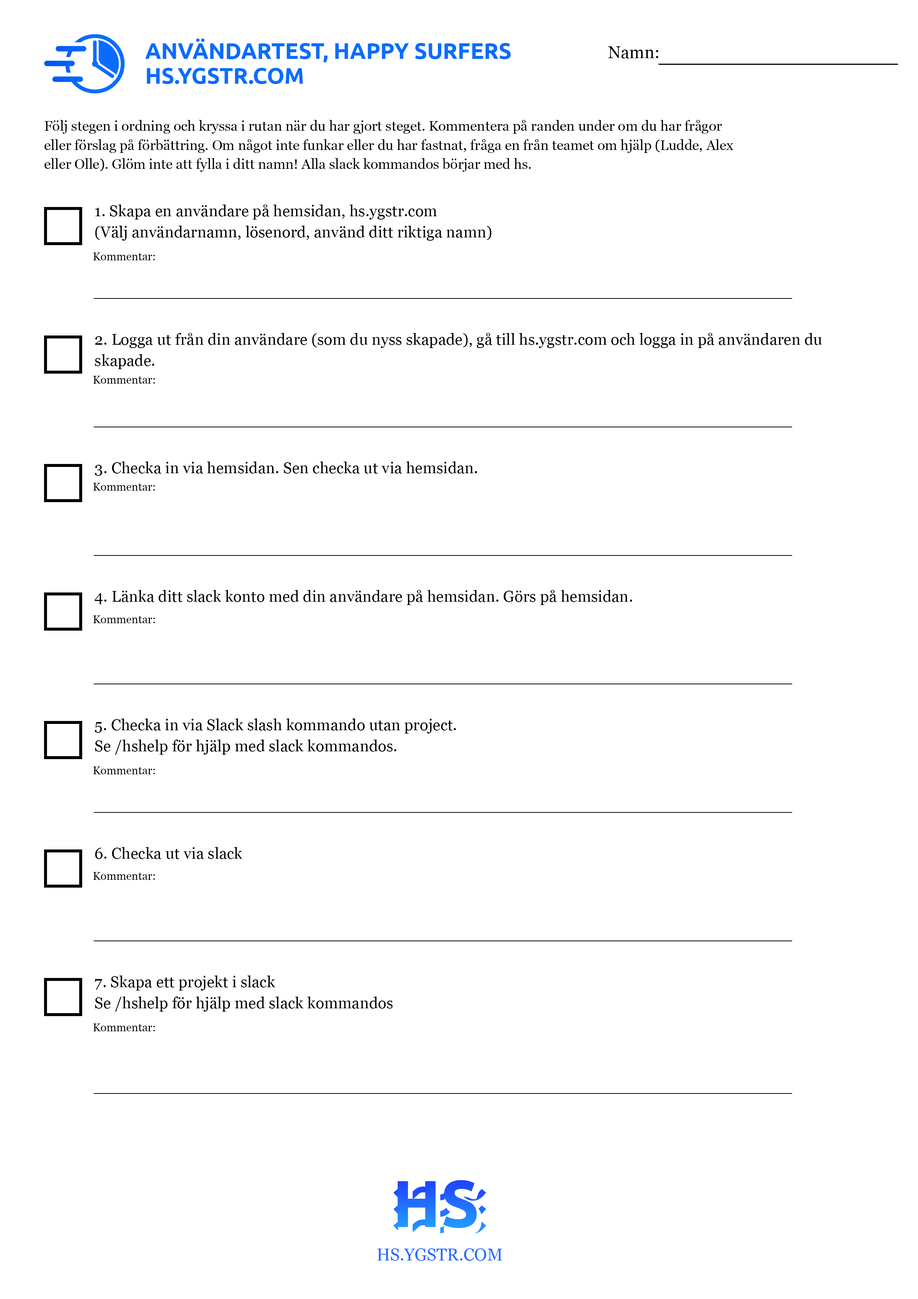
<style>
.page{position:relative;width:918px;height:1299px;background:#ffffff}
.page>*{position:absolute;margin:0}
.t1{font:22.2px/24.9px "Ubuntu-Bold";color:#0a6cff}
.t2{font:17px "Georgia";color:#000000}
.t3{font:13.9px/19.1px "Georgia";color:#000000}
.t4{font:15.7px/21.4px "Georgia";color:#000000}
.t5{font:11.2px "Georgia";color:#000000}
.t6{font:15.7px "Georgia";color:#000000}
.t7{font:17px "Georgia";color:#216aff}
</style>
<div class="page">
<p class="t1" style="left:145px;top:39px;width:366px;height:45px">ANVÄNDARTEST, HAPPY SURFERS<br>HS.YGSTR.COM</p>
<p class="t2" style="left:608px;top:46px;width:51px;height:12px">Namn:</p>
<p class="t3" style="left:44px;top:120px;width:689px;height:52px">Följ stegen i ordning och kryssa i rutan när du har gjort steget. Kommentera på randen under om du har frågor eller förslag på förbättring. Om något inte funkar eller du har fastnat, fråga en från teamet om hjälp (Ludde, Alex eller Olle). Glöm inte att fylla i ditt namn! Alla slack kommandos börjar med hs.</p>
<p class="t4" style="left:95px;top:204px;width:397px;height:37px">1. Skapa en användare på hemsidan, hs.ygstr.com<br>(Välj användarnamn, lösenord, använd ditt riktiga namn)</p>
<p class="t5" style="left:93px;top:252px;width:62px;height:8px">Kommentar:</p>
<p class="t4" style="left:95px;top:333px;width:727px;height:36px">2. Logga ut från din användare (som du nyss skapade), gå till hs.ygstr.com och logga in på användaren du skapade.</p>
<p class="t5" style="left:93px;top:376px;width:62px;height:8px">Kommentar:</p>
<p class="t6" style="left:95px;top:461px;width:382px;height:15px">3. Checka in via hemsidan. Sen checka ut via hemsidan.</p>
<p class="t5" style="left:93px;top:483px;width:62px;height:8px">Kommentar:</p>
<p class="t6" style="left:95px;top:590px;width:537px;height:15px">4. Länka ditt slack konto med din användare på hemsidan. Görs på hemsidan.</p>
<p class="t5" style="left:93px;top:615px;width:62px;height:8px">Kommentar:</p>
<p class="t4" style="left:95px;top:718px;width:361px;height:37px">5. Checka in via Slack slash kommando utan project.<br>Se /hshelp för hjälp med slack kommandos.</p>
<p class="t5" style="left:93px;top:766px;width:62px;height:8px">Kommentar:</p>
<p class="t6" style="left:95px;top:847px;width:147px;height:12px">6. Checka ut via slack</p>
<p class="t5" style="left:93px;top:872px;width:62px;height:8px">Kommentar:</p>
<p class="t4" style="left:95px;top:975px;width:298px;height:36px">7. Skapa ett projekt i slack<br>Se /hshelp för hjälp med slack kommandos</p>
<p class="t5" style="left:93px;top:1023px;width:62px;height:8px">Kommentar:</p>
<p class="t7" style="left:377px;top:1248px;width:125px;height:13px">HS.YGSTR.COM</p>
</div>
